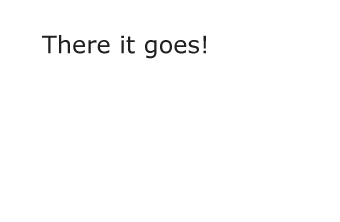
<style>
.page{position:relative;width:340px;height:222px;background:#ffffff}
.page>*{position:absolute;margin:0}
.t1{font:24px "Verdana";color:#202020}
</style>
<div class="page">
<p class="t1" style="left:42px;top:35px;width:164px;height:24px">There it goes!</p>
</div>
